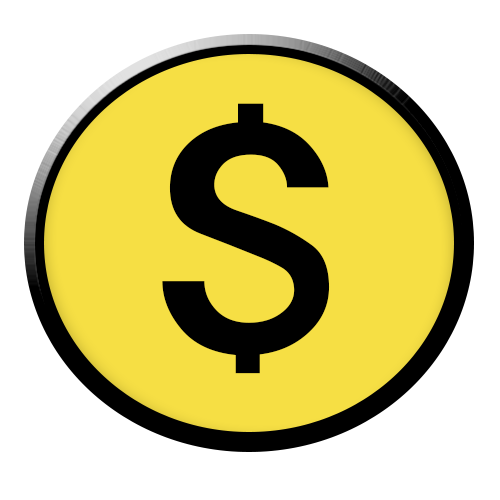
<style>
.page{position:relative;width:500px;height:500px;background:#ffffff}
.page>*{position:absolute;margin:0}
.t1{font:300px "ExpoM-HM";letter-spacing:-0.01em;color:#000000}
</style>
<div class="page">
<p class="t1" style="left:162px;top:103px;width:168px;height:271px">$</p>
</div>
